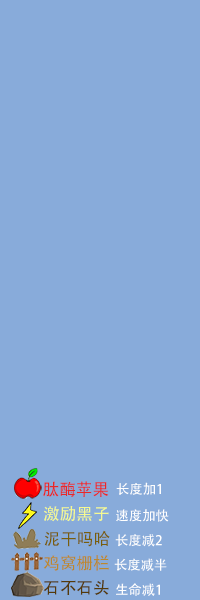
<style>
.page{position:relative;width:200px;height:600px;background:#88abda}
.page>*{position:absolute;margin:0}
.t1{font:16.7px "AdobeHeitiStd-Regular";color:#e92828}
.t2{font:13.3px "AdobeHeitiStd-Regular";color:#fefefe}
.t3{font:16.7px "AdobeHeitiStd-Regular";color:#f5f991}
.t4{font:13.3px "AdobeHeitiStd-Regular";color:#ffffff}
.t5{font:16.7px "AdobeHeitiStd-Regular";color:#795e0c}
.t6{font:16.7px "AdobeHeitiStd-Regular";color:#bc882d}
.t7{font:16.7px "AdobeHeitiStd-Regular";color:#553a0a}
</style>
<div class="page">
<p class="t1" style="left:43px;top:481px;width:66px;height:16px">肽酶苹果</p>
<p class="t2" style="left:116px;top:482px;width:45px;height:13px">长度加1</p>
<p class="t3" style="left:44px;top:506px;width:65px;height:16px">激励黑子</p>
<p class="t4" style="left:116px;top:509px;width:53px;height:13px">速度加快</p>
<p class="t5" style="left:44px;top:530px;width:66px;height:17px">泥干吗哈</p>
<p class="t2" style="left:115px;top:534px;width:47px;height:13px">长度减2</p>
<p class="t6" style="left:43px;top:555px;width:66px;height:16px">鸡窝栅栏</p>
<p class="t4" style="left:114px;top:558px;width:53px;height:13px">长度减半</p>
<p class="t7" style="left:43px;top:580px;width:66px;height:15px">石不石头</p>
<p class="t4" style="left:116px;top:583px;width:44px;height:13px">生命减1</p>
</div>
